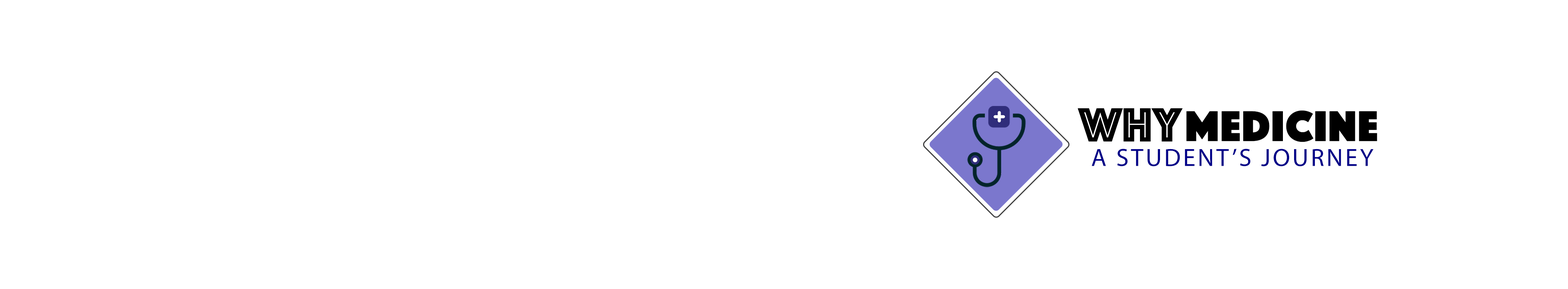
<style>
.page{position:relative;width:1568px;height:289px;background:#ffffff}
.page>*{position:absolute;margin:0}
.t1{font:49.7px "Phosphate-Inline";color:#000000}
.t2{font:44.3px "Phosphate-Solid";color:#000000;font-weight:bold}
.t3{font:25px "MyriadPro-Regular";letter-spacing:0.09em;color:#000088;text-transform:uppercase}
</style>
<div class="page">
<p class="t1" style="left:1078px;top:108px;width:105px;height:34px">WHY</p>
<p class="t2" style="left:1186px;top:110px;width:191px;height:32px">Medicine</p>
<p class="t3" style="left:1091px;top:149px;width:282px;height:17px">A Student’s Journey</p>
</div>
